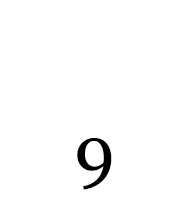
<style>
.page{position:relative;width:188px;height:202px;background:#ffffff}
.page>*{position:absolute;margin:0}
.t1{font:71.3px "Georgia";color:#000000}
</style>
<div class="page">
<p class="t1" style="left:77px;top:138px;width:35px;height:52px">9</p>
</div>
